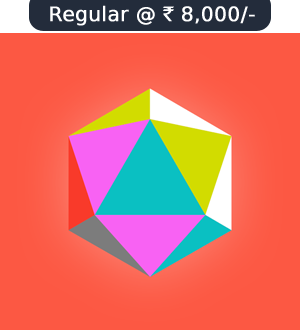
<style>
.page{position:relative;width:300px;height:330px;background:#fc5843}
.page>*{position:absolute;margin:0}
.t1{font:20px "RupeeForadian";color:#ffffff;font-weight:bold}
</style>
<div class="page">
<p class="t1" style="left:50px;top:5px;width:205px;height:21px">Regular @ ` 8,000/-</p>
</div>
